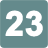
<style>
.page{position:relative;width:48px;height:48px;background:#648a8c}
.page>*{position:absolute;margin:0}
.t1{font:33.7px "Arial-BoldMT";color:#ffffff;font-weight:bold}
</style>
<div class="page">
<p class="t1" style="left:5px;top:10px;width:38px;height:27px">23</p>
</div>
